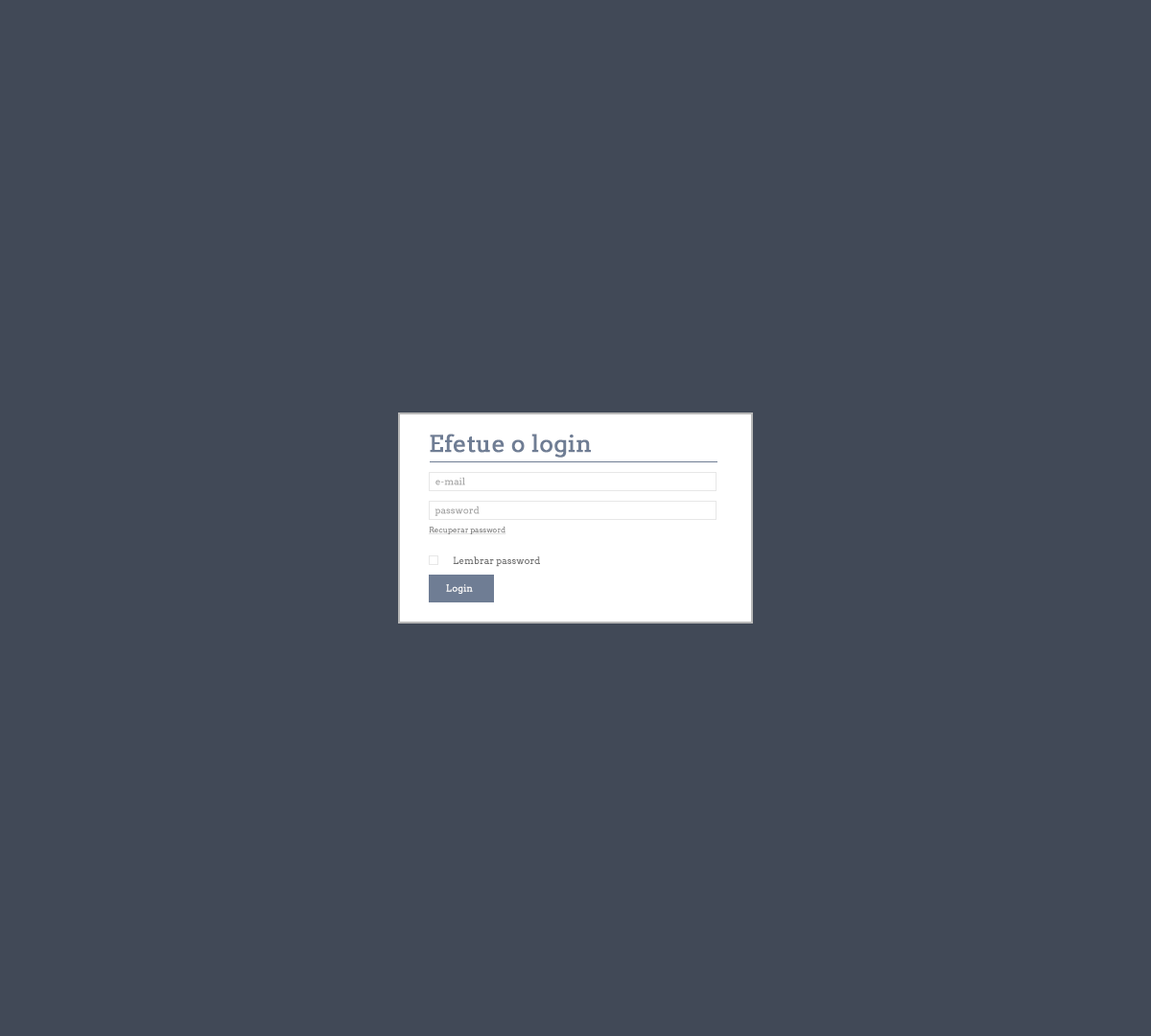
<style>
.page{position:relative;width:1151px;height:1036px;background:#414957}
.page>*{position:absolute;margin:0}
.t1{font:23px "Arvo";color:#6f7d94;font-weight:bold}
.t2{font:9.6px "Arvo";color:#a5a5a5}
.t3{font:7.7px "Arvo";color:#717171;text-decoration:underline}
.t4{font:9.6px "Arvo";color:#717171}
.t5{font:9.6px "Arvo";color:#ffffff}
</style>
<div class="page">
<p class="t1" style="left:430px;top:434px;width:161px;height:24px">Efetue o login</p>
<p class="t2" style="left:435px;top:477px;width:30px;height:8px">e-mail</p>
<p class="t2" style="left:435px;top:506px;width:45px;height:10px">password</p>
<p class="t3" style="left:429px;top:527px;width:77px;height:7px">Recuperar password</p>
<p class="t4" style="left:453px;top:556px;width:87px;height:11px">Lembrar password</p>
<p class="t5" style="left:446px;top:584px;width:27px;height:10px">Login</p>
</div>
